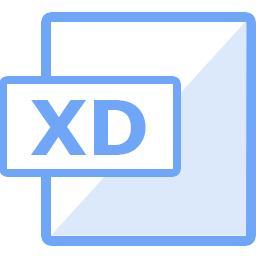
<style>
.page{position:relative;width:256px;height:256px;background:#ffffff}
.page>*{position:absolute;margin:0}
.t1{font:75px "Verdana-Bold";color:#6fa6f7}
</style>
<div class="page">
<p class="t1" style="left:31px;top:100px;width:115px;height:55px">XD</p>
</div>
